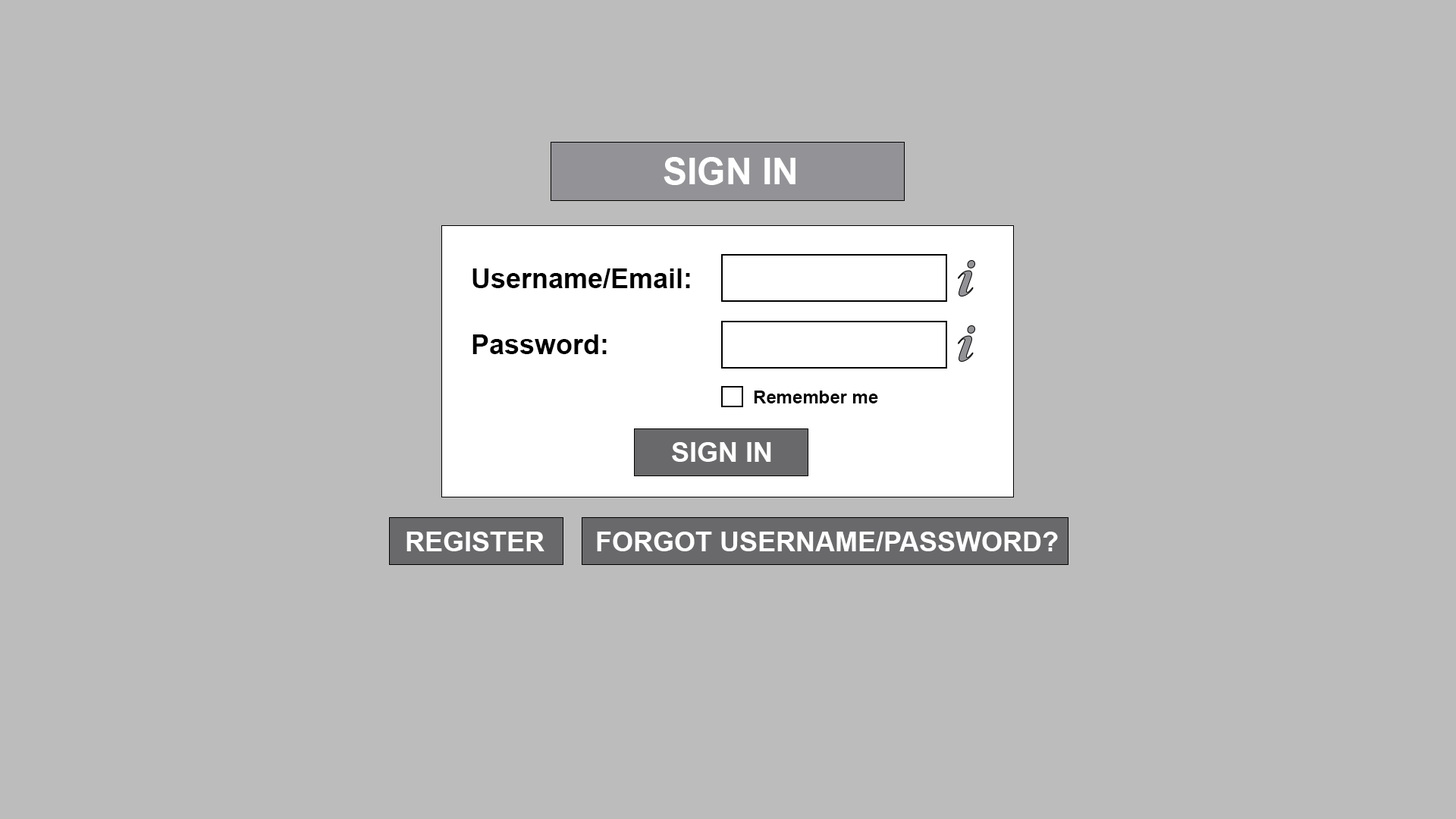
<style>
.page{position:relative;width:1456px;height:819px;background:#bcbcbc}
.page>*{position:absolute;margin:0}
.t1{font:36.4px "Arial-BoldMT";color:#ffffff}
.t2{font:27.3px "Arial-BoldMT";color:#000000}
.t3{font:18.2px "Arial-BoldMT";color:#000000}
.t4{font:27.3px "Arial-BoldMT";color:#ffffff}
</style>
<div class="page">
<p class="t1" style="left:664px;top:157px;width:131px;height:28px">SIGN IN</p>
<p class="t2" style="left:472px;top:268px;width:218px;height:20px">Username/Email:</p>
<p class="t2" style="left:472px;top:334px;width:135px;height:20px">Password:</p>
<p class="t3" style="left:754px;top:391px;width:124px;height:12px">Remember me</p>
<p class="t4" style="left:672px;top:442px;width:99px;height:20px">SIGN IN</p>
<p class="t4" style="left:406px;top:532px;width:138px;height:19px">REGISTER</p>
<p class="t4" style="left:597px;top:532px;width:461px;height:19px">FORGOT USERNAME/PASSWORD?</p>
</div>
